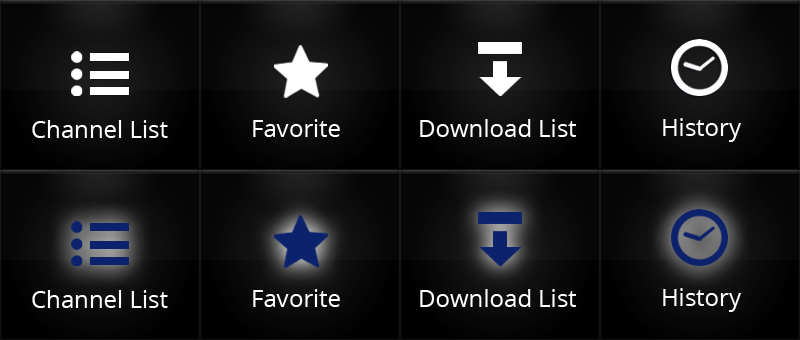
<style>
.page{position:relative;width:800px;height:340px}
.page>*{position:absolute;margin:0}
.t1{font:24px "OpenSans";color:#ffffff}
</style>
<div class="page">
<p class="t1" style="left:32px;top:120px;width:136px;height:18px">Channel List</p>
<p class="t1" style="left:253px;top:119px;width:87px;height:18px">Favorite</p>
<p class="t1" style="left:420px;top:119px;width:157px;height:18px">Download List</p>
<p class="t1" style="left:663px;top:118px;width:78px;height:24px">History</p>
<p class="t1" style="left:32px;top:290px;width:136px;height:18px">Channel List</p>
<p class="t1" style="left:253px;top:289px;width:87px;height:18px">Favorite</p>
<p class="t1" style="left:420px;top:289px;width:157px;height:18px">Download List</p>
<p class="t1" style="left:663px;top:288px;width:78px;height:24px">History</p>
</div>
